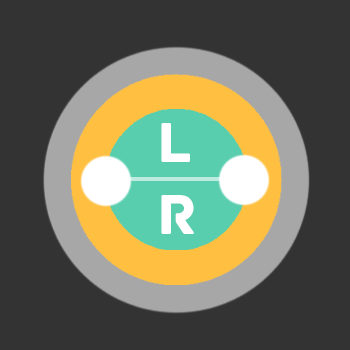
<style>
.page{position:relative;width:350px;height:350px;background:#333333}
.page>*{position:absolute;margin:0}
.t1{font:60px "Archive";color:#ffffff}
</style>
<div class="page">
<p class="t1" style="left:161px;top:123px;width:33px;height:111px">L<br>R</p>
</div>
